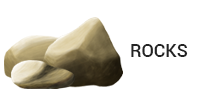
<style>
.page{position:relative;width:200px;height:100px;background:#ffffff}
.page>*{position:absolute;margin:0}
.t1{font:18px "Roboto-Medium";color:#242424}
</style>
<div class="page">
<p class="t1" style="left:131px;top:44px;width:57px;height:13px">ROCKS</p>
</div>
